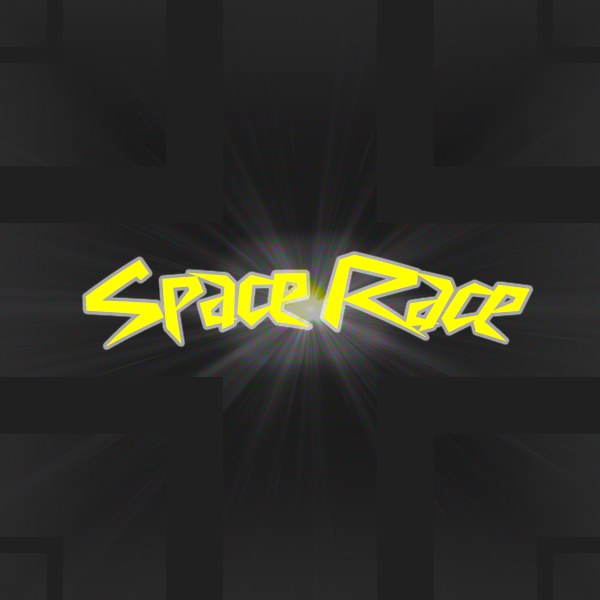
<style>
.page{position:relative;width:600px;height:600px;background:#202020}
.page>*{position:absolute;margin:0}
.t1{font:94.6px "CyberwayRiders";color:#ffff00}
</style>
<div class="page">
<p class="t1" style="left:85px;top:254px;width:445px;height:93px">Space Race</p>
</div>
